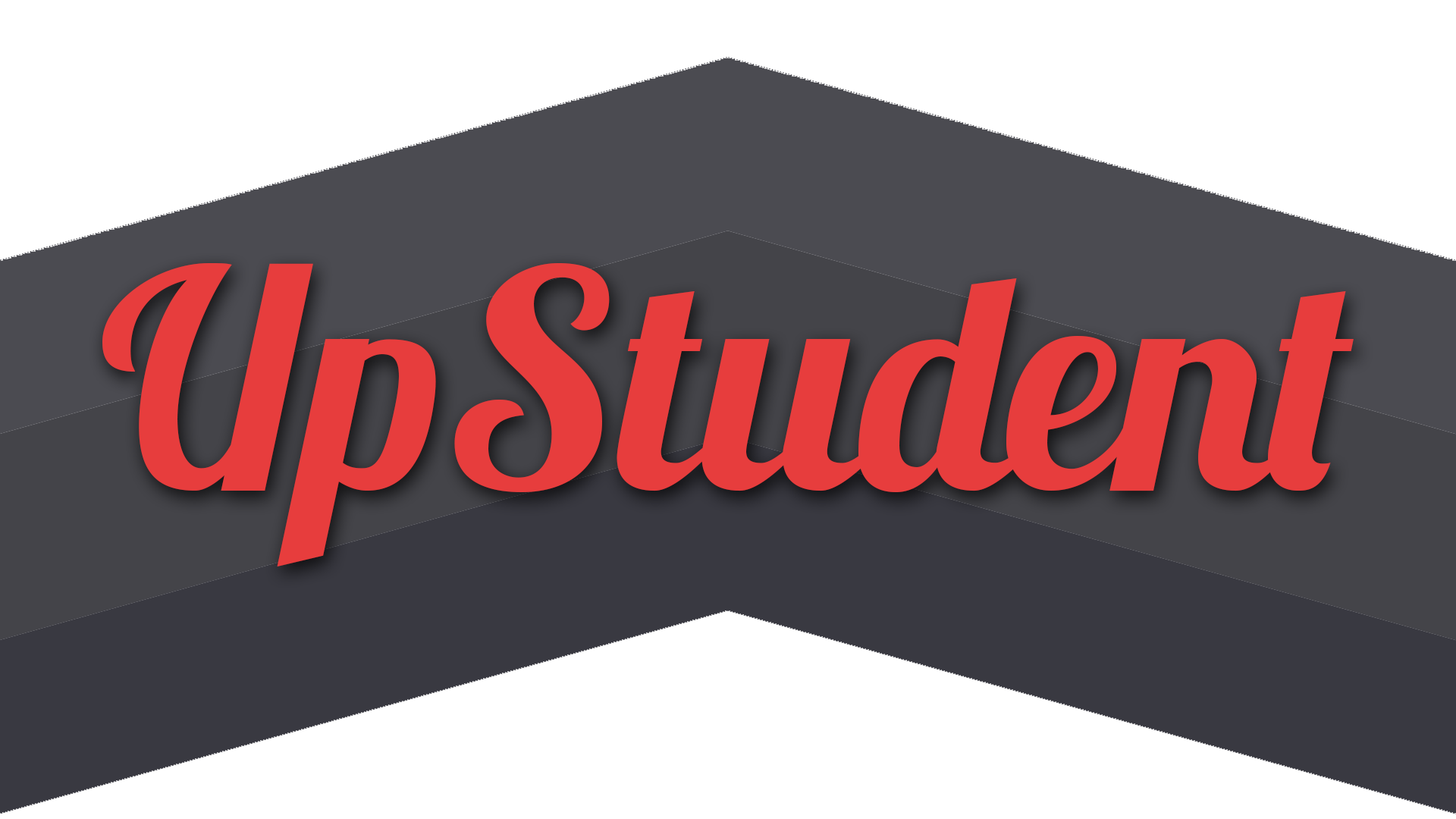
<style>
.page{position:relative;width:1456px;height:819px;background:#ffffff}
.page>*{position:absolute;margin:0}
.t1{font:303.3px "Lobster1.3";color:#e73d3d}
</style>
<div class="page">
<p class="t1" style="left:102px;top:263px;width:1252px;height:303px">UpStudent</p>
</div>
